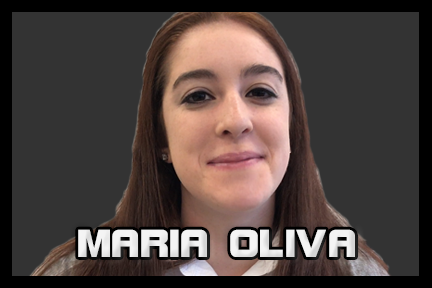
<style>
.page{position:relative;width:432px;height:288px;background:#333333}
.page>*{position:absolute;margin:0}
.t1{font:41.7px "BolsterBold";color:#f3f3f3}
</style>
<div class="page">
<p class="t1" style="left:78px;top:229px;width:277px;height:28px">MARIA OLIVA</p>
</div>
